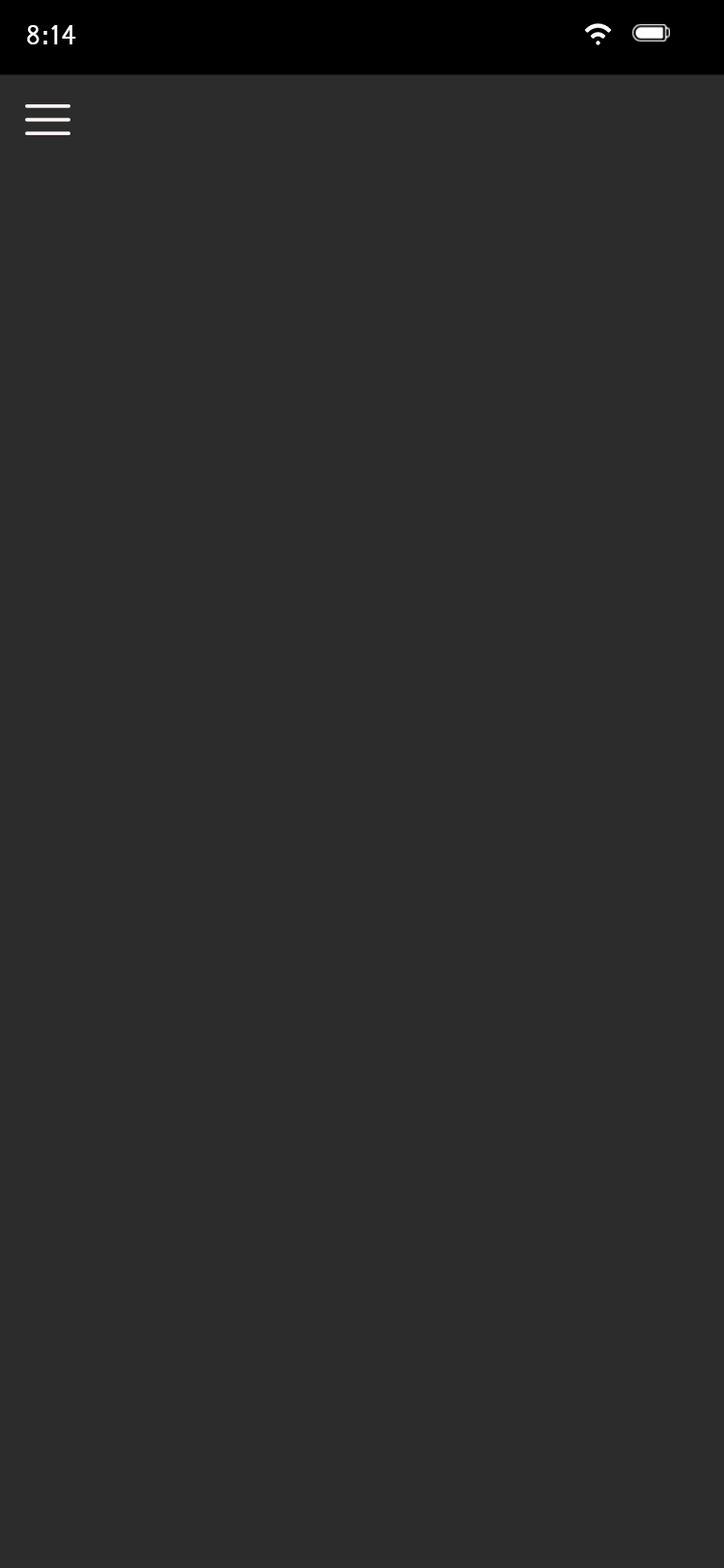
<style>
.page{position:relative;width:724px;height:1568px;background:#2d2c2c}
.page>*{position:absolute;margin:0}
.t1{font:29.9px "Shruti";color:#ffffff;scale:0.94 1}
</style>
<div class="page">
<p class="t1" style="left:27px;top:25px;width:49px;height:19px">8:14</p>
</div>
